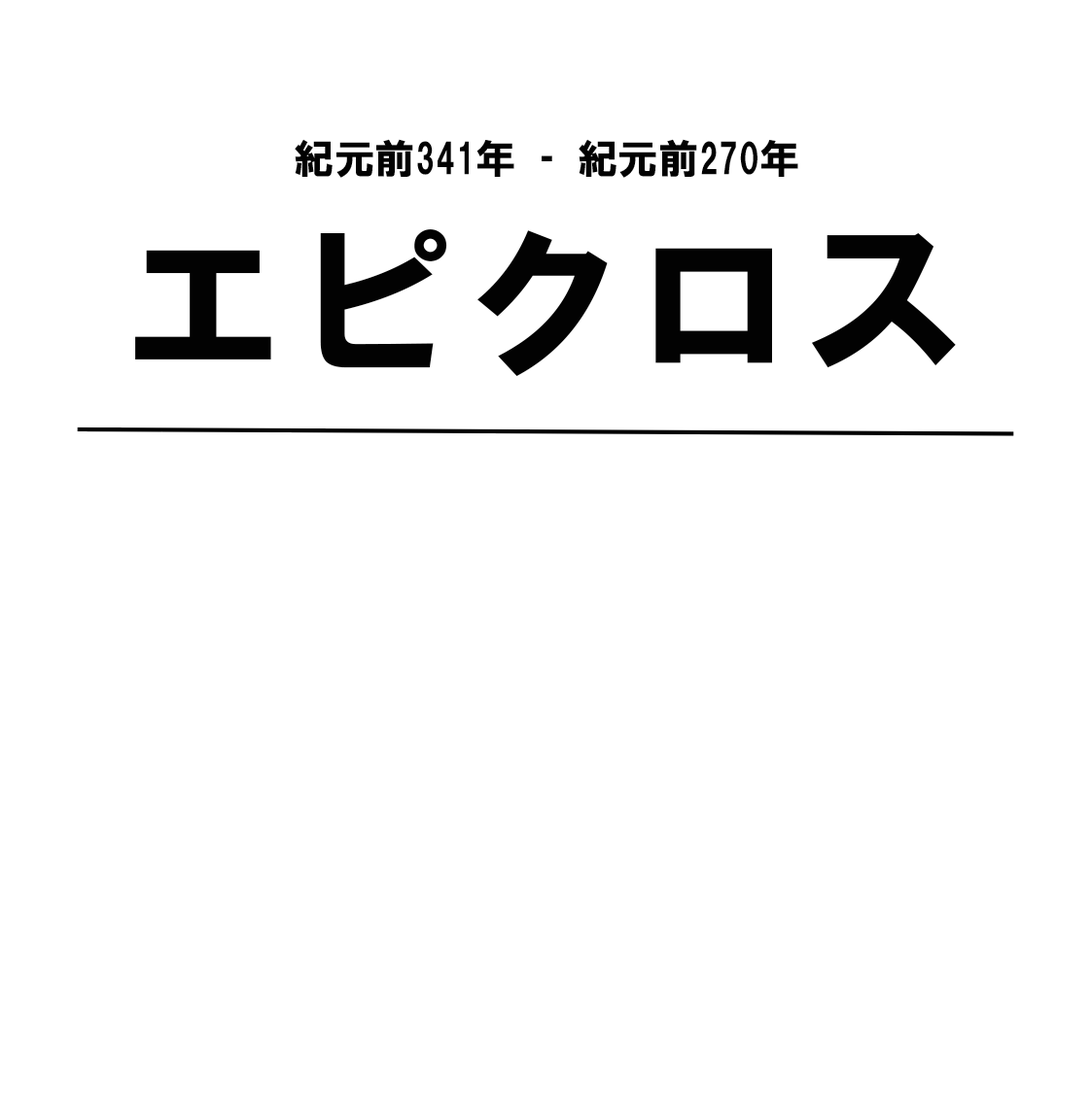
<style>
.page{position:relative;width:1091px;height:1093px;background:#ffffff}
.page>*{position:absolute;margin:0}
.t1{font:40.5px "HGSoeiKakugothicUB";color:#020202}
.t2{font:170.1px "HGSoeiKakugothicUB";color:#020202}
</style>
<div class="page">
<p class="t1" style="left:295px;top:139px;width:503px;height:39px">紀元前341年 – 紀元前270年</p>
<p class="t2" style="left:135px;top:229px;width:820px;height:147px">エピクロス</p>
</div>
